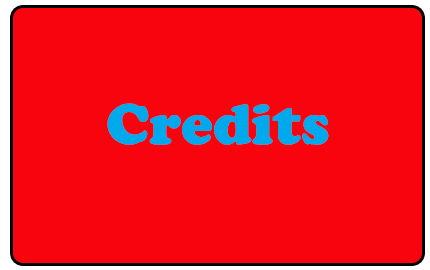
<style>
.page{position:relative;width:430px;height:270px;background:#f7040f}
.page>*{position:absolute;margin:0}
.t1{font:59.7px "CooperBlack";color:#00a9ec}
</style>
<div class="page">
<p class="t1" style="left:107px;top:103px;width:222px;height:42px">Credits</p>
</div>
